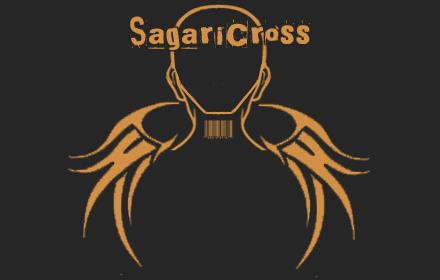
<style>
.page{position:relative;width:440px;height:280px;background:#262626}
.page>*{position:absolute;margin:0}
.t1{font:48.5px "Broken15";color:#d19043}
</style>
<div class="page">
<p class="t1" style="left:130px;top:16px;width:180px;height:34px">SagariCross</p>
</div>
